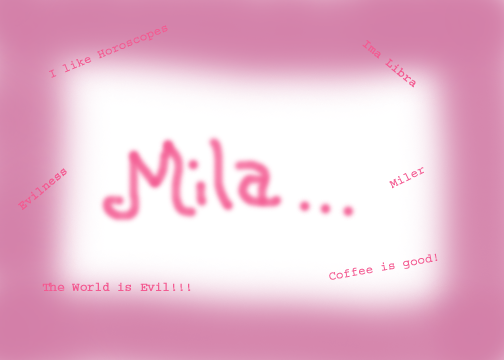
<style>
.page{position:relative;width:504px;height:360px}
.page>*{position:absolute;margin:0}
.t1{font:12px "Courier";color:#f35a91;font-weight:bold}
</style>
<div class="page">
<p class="t1" style="left:49px;top:25px;width:119px;height:53px;rotate:-22deg">I like Horoscopes</p>
<p class="t1" style="left:362px;top:40px;width:54px;height:48px;rotate:39deg">Ima Libra</p>
<p class="t1" style="left:18px;top:168px;width:49px;height:42px;rotate:-40deg">Evilness</p>
<p class="t1" style="left:329px;top:253px;width:109px;height:27px;rotate:-10deg">Coffee is good!</p>
<p class="t1" style="left:42px;top:282px;width:149px;height:9px">The World is Evil!!!</p>
</div>
